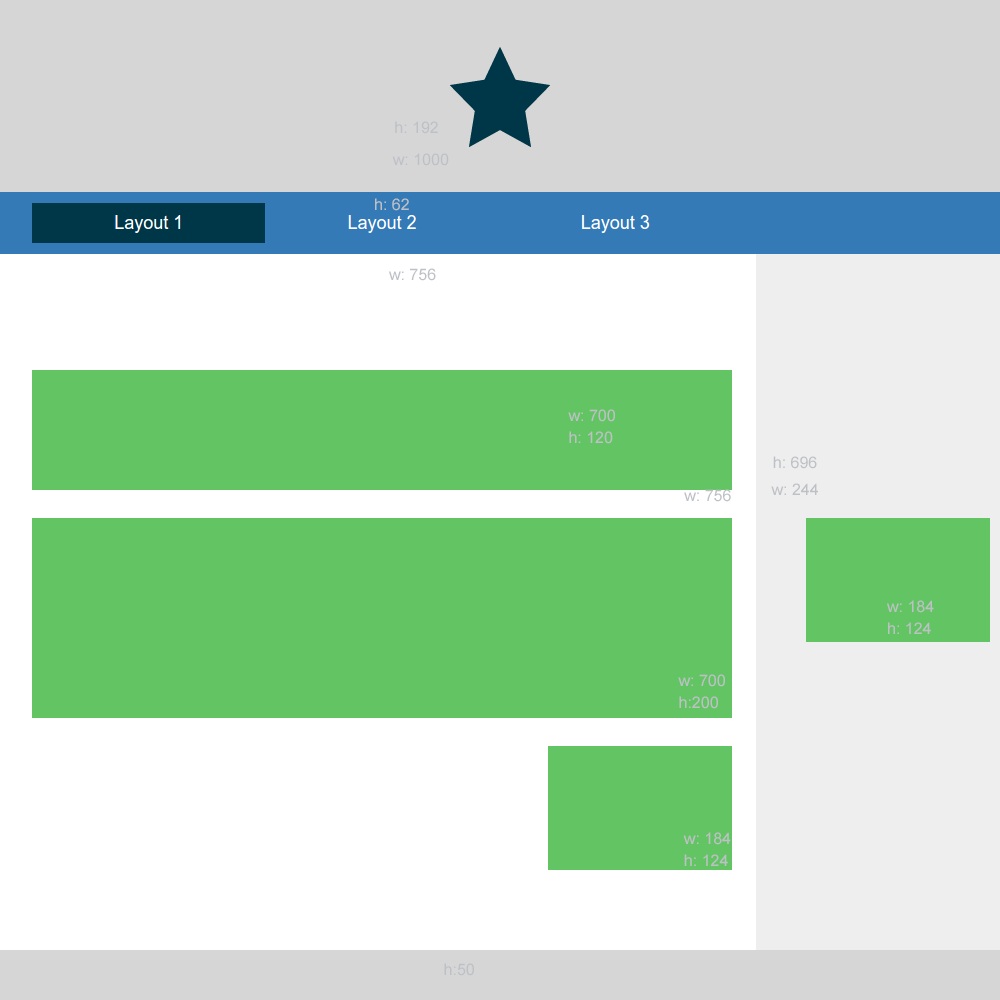
<style>
.page{position:relative;width:1000px;height:1000px;background:#ffffff}
.page>*{position:absolute;margin:0}
.t1{font:16px "ArialMT";color:#bdc1c6}
.t2{font:16px/22px "ArialMT";color:#bdc1c6}
</style>
<div class="page">
<p class="t1" style="left:395px;top:121px;width:43px;height:13px">h: 192</p>
<p class="t1" style="left:392px;top:153px;width:57px;height:13px">w: 1000</p>
<p class="t1" style="left:375px;top:198px;width:34px;height:13px">h: 62</p>
<p class="t1" style="left:389px;top:268px;width:47px;height:13px">w: 756</p>
<p class="t2" style="left:568px;top:409px;width:47px;height:35px">w: 700<br>h: 120</p>
<p class="t1" style="left:773px;top:456px;width:44px;height:13px">h: 696</p>
<p class="t1" style="left:771px;top:483px;width:47px;height:12px">w: 244</p>
<p class="t1" style="left:684px;top:489px;width:47px;height:13px">w: 756</p>
<p class="t2" style="left:887px;top:600px;width:47px;height:34px">w: 184<br>h: 124</p>
<p class="t2" style="left:678px;top:674px;width:47px;height:35px">w: 700<br>h:200</p>
<p class="t2" style="left:683px;top:832px;width:48px;height:34px">w: 184<br>h: 124</p>
<p class="t1" style="left:444px;top:963px;width:30px;height:13px">h:50</p>
</div>
